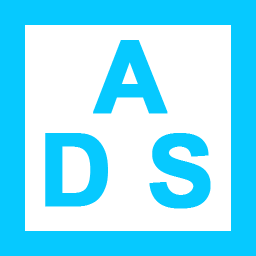
<style>
.page{position:relative;width:256px;height:256px;background:#ffffff}
.page>*{position:absolute;margin:0}
.t1{font:100px "Arial-BoldMT";letter-spacing:0.01em;color:#06c9ff;font-weight:bold}
</style>
<div class="page">
<p class="t1" style="left:93px;top:40px;width:75px;height:74px">A</p>
<p class="t1" style="left:45px;top:133px;width:63px;height:74px">D</p>
<p class="t1" style="left:149px;top:133px;width:62px;height:76px">S</p>
</div>
